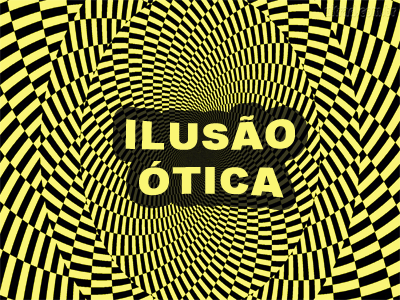
<style>
.page{position:relative;width:400px;height:300px}
.page>*{position:absolute;margin:0}
.t1{font:41.7px "Arial-Black";letter-spacing:0.01em;color:#faf674}
</style>
<div class="page">
<p class="t1" style="left:125px;top:115px;width:170px;height:83px;text-align:center">ILUSÃO<br>ÓTICA</p>
</div>
